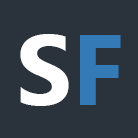
<style>
.page{position:relative;width:138px;height:138px;background:#2a333b}
.page>*{position:absolute;margin:0}
.t1{font:100px "Gadugi-Bold";color:#ffffff}
.t2{font:100px "Gadugi-Bold";color:#337ab7}
</style>
<div class="page">
<p class="t1" style="left:20px;top:34px;width:101px;height:72px">S<span class="t2">F</span></p>
</div>
